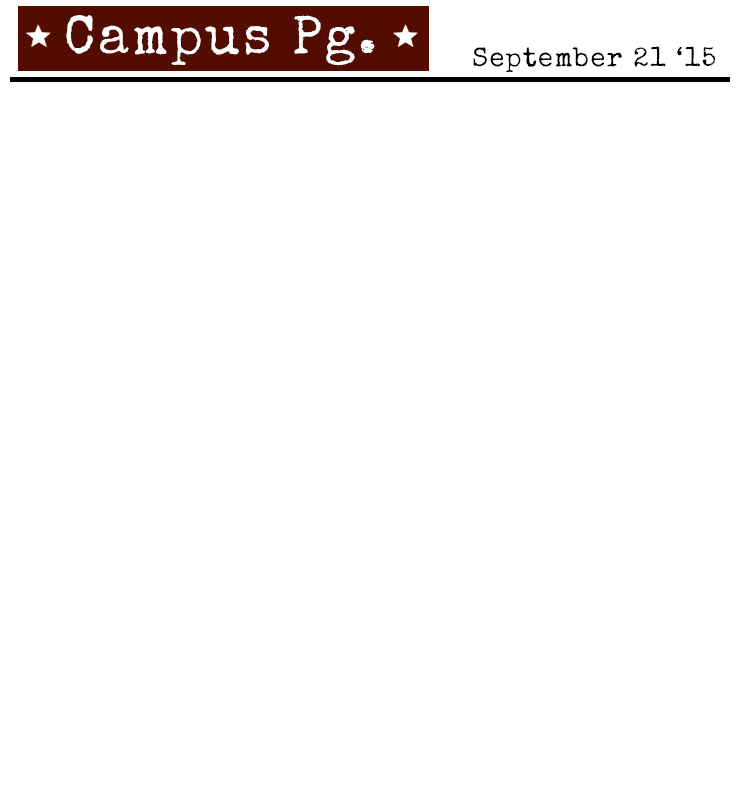
<style>
.page{position:relative;width:750px;height:800px;background:#ffffff}
.page>*{position:absolute;margin:0}
.t1{font:54.3px "SpecialElite-Regular";letter-spacing:0.05em;color:#ffffff}
.t2{font:27.2px "SpecialElite-Regular";letter-spacing:0.05em;color:#000000}
</style>
<div class="page">
<p class="t1" style="left:66px;top:15px;width:309px;height:51px">Campus Pg.</p>
<p class="t2" style="left:473px;top:46px;width:243px;height:26px">September 21 ‘15</p>
</div>
